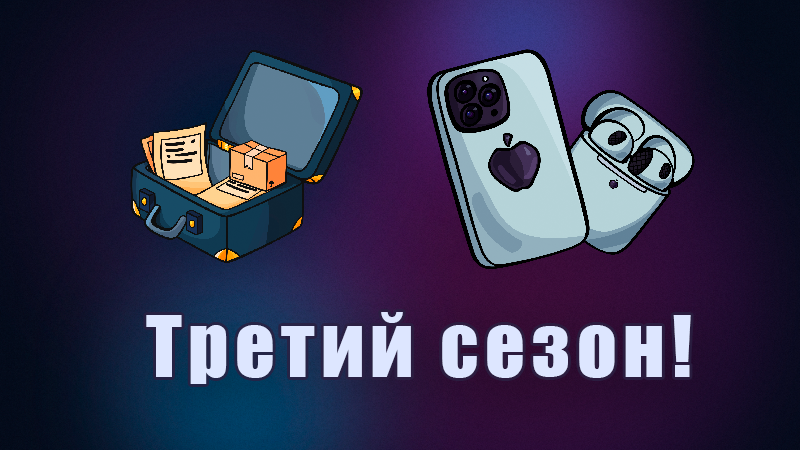
<style>
.page{position:relative;width:800px;height:450px}
.page>*{position:absolute;margin:0}
.t1{font:78.1px "Impact";letter-spacing:0.08em;color:#dde6ff}
</style>
<div class="page">
<p class="t1" style="left:146px;top:312px;width:545px;height:72px">Третий сезон!</p>
</div>
